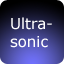
<style>
.page{position:relative;width:64px;height:64px}
.page>*{position:absolute;margin:0}
.t1{font:14.9px "Verdana";color:#ffffff}
</style>
<div class="page">
<p class="t1" style="left:10px;top:17px;width:42px;height:31px">Ultra-<br>sonic</p>
</div>
